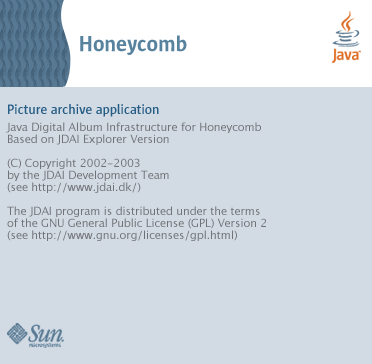
<style>
.page{position:relative;width:372px;height:364px;background:#d2dbe4}
.page>*{position:absolute;margin:0}
.t1{font:22px "SunSansDemi";letter-spacing:0.01em;color:#58839f}
.t2{font:14px "SunSansSemiBold";letter-spacing:-0.01em;color:#265d85}
.t3{font:11px/12px "LucidaGrande";letter-spacing:-0.01em;color:#707277}
</style>
<div class="page">
<p class="t1" style="left:80px;top:35px;width:107px;height:20px">Honeycomb</p>
<p class="t2" style="left:8px;top:104px;width:151px;height:13px">Picture archive application</p>
<p class="t3" style="left:6px;top:122px;width:260px;height:119px">Java Digital Album Infrastructure for Honeycomb<br>Based on JDAI Explorer Version<br><br>(C) Copyright 2002-2003<br>by the JDAI Development Team<br>(see http://www.jdai.dk/)<br><br>The JDAI program is distributed under the terms<br>of the GNU General Public License (GPL) Version 2<br>(see http://www.gnu.org/licenses/gpl.html)</p>
</div>
